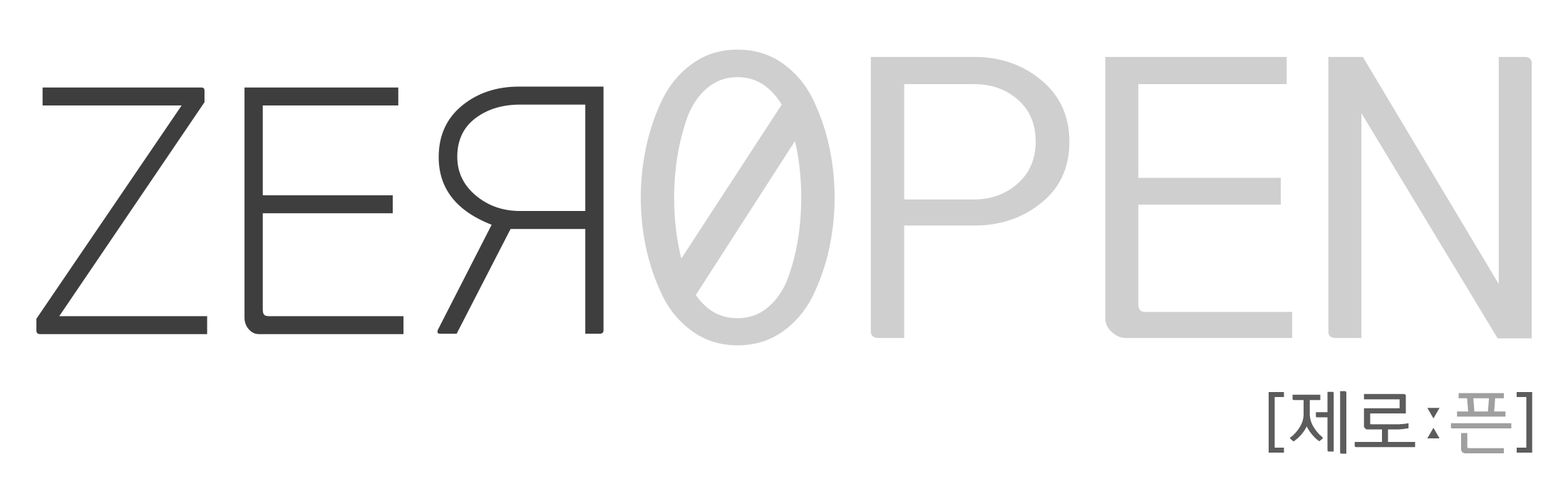
<style>
.page{position:relative;width:1568px;height:479px;background:#ffffff}
.page>*{position:absolute;margin:0}
.t1{font:366.5px "KoreanDREAM3-R";color:#cfcfcf}
.t2{font:326px "KoreanDREAM1-R";color:#3e3e3e}
.t3{font:326.3px "KoreanDREAM1-R";color:#3e3e3e}
.t4{font:67.5px "KoreanDREAM3-R";color:#5c5c5c}
.t5{font:67.5px "KoreanDREAM3-R";color:#9f9f9f}
</style>
<div class="page">
<p class="t1" style="left:36px;top:49px;width:1496px;height:297px"><span class="t2">ZER</span>0PEN</p>
<p class="t3" style="left:437px;top:86px;width:167px;height:248px;rotate:180deg">R</p>
<p class="t4" style="left:1269px;top:391px;width:263px;height:63px">[제로ː<span class="t5">픈</span>]</p>
</div>
